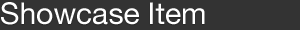
<style>
.page{position:relative;width:300px;height:30px;background:#333333}
.page>*{position:absolute;margin:0}
.t1{font:30px "HelveticaNeue";color:#ffffff}
</style>
<div class="page">
<p class="t1" style="left:1px;top:2px;width:204px;height:23px">Showcase Item</p>
</div>
